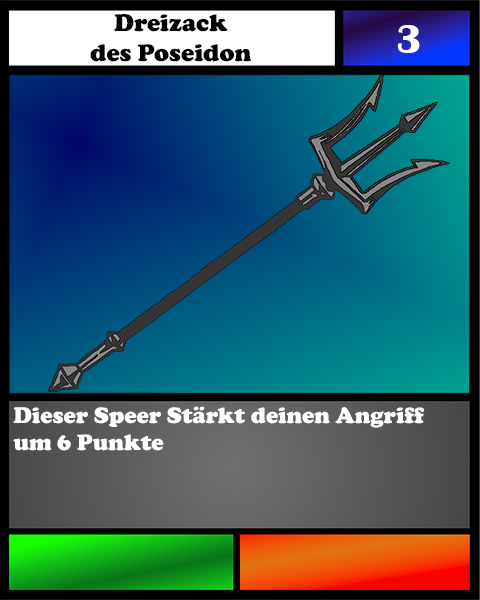
<style>
.page{position:relative;width:480px;height:600px}
.page>*{position:absolute;margin:0}
.t1{font:25px "CooperBlack";color:#000000}
.t2{font:41.7px "BritannicBold";color:#ffffff}
.t3{font:23.1px "CooperBlack";color:#ffffff}
</style>
<div class="page">
<p class="t1" style="left:90px;top:14px;width:161px;height:48px;text-align:center">Dreizack <br>des Poseidon</p>
<p class="t2" style="left:397px;top:25px;width:23px;height:28px">3</p>
<p class="t3" style="left:13px;top:406px;width:412px;height:45px">Dieser Speer Stärkt deinen Angriff um 6 Punkte</p>
</div>
